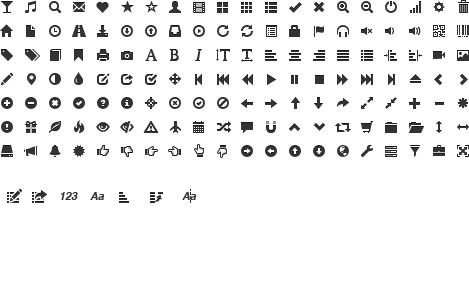
<style>
.page{position:relative;width:469px;height:300px;background:#ffffff}
.page>*{position:absolute;margin:0}
.t1{font:10.8px "Helvetica-BoldOblique";color:#333333}
</style>
<div class="page">
<p class="t1" style="left:60px;top:192px;width:18px;height:8px">123</p>
<p class="t1" style="left:90px;top:192px;width:15px;height:8px">Aa</p>
<p class="t1" style="left:182px;top:192px;width:15px;height:8px">Aa</p>
</div>
